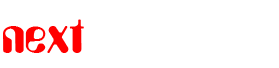
<style>
.page{position:relative;width:279px;height:68px;background:#ffffff}
.page>*{position:absolute;margin:0}
.t1{font:48px "Asimov";color:#ff0000}
</style>
<div class="page">
<p class="t1" style="left:3px;top:19px;width:81px;height:34px">next</p>
</div>
